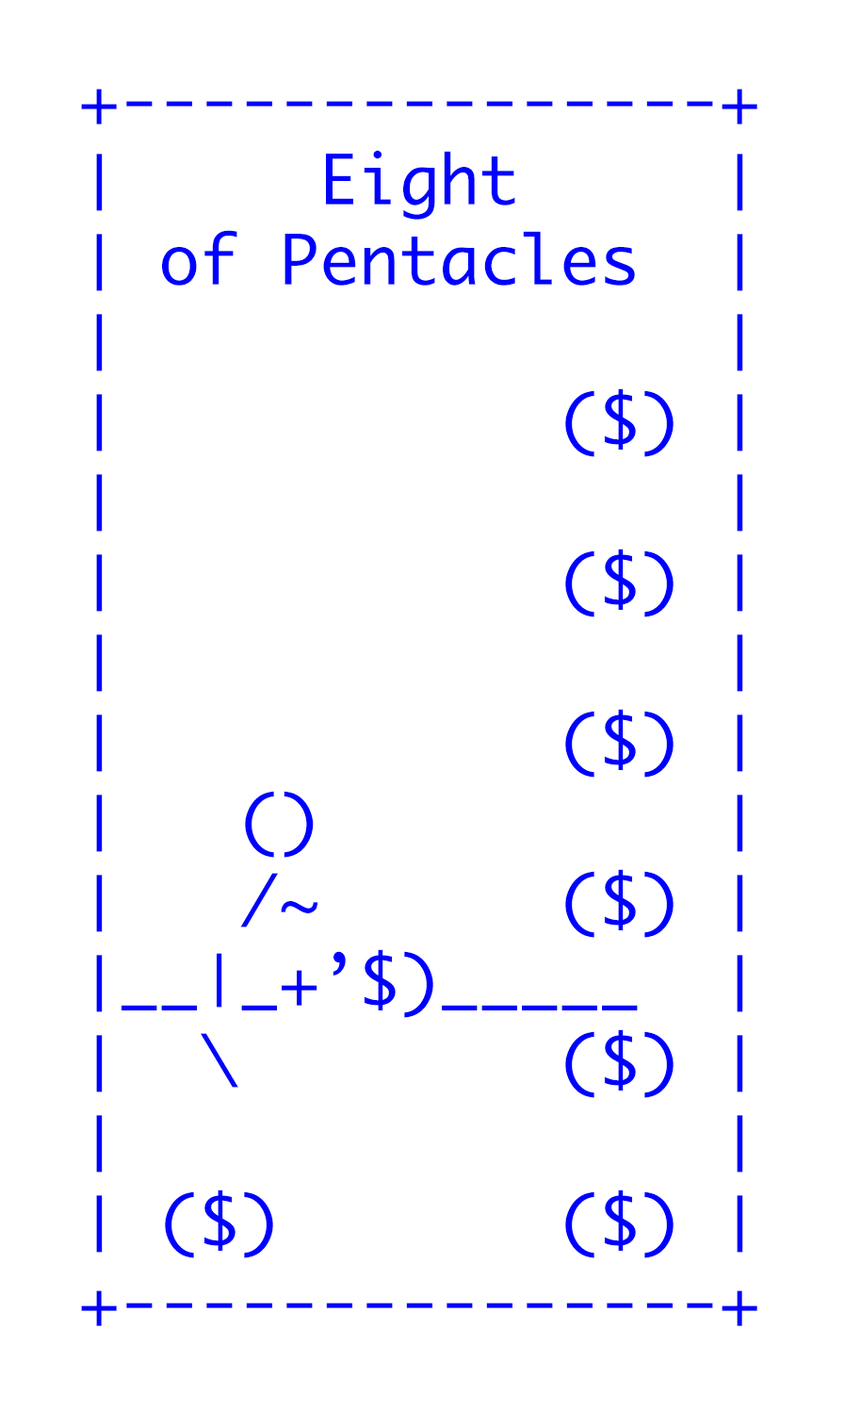
<style>
.page{position:relative;width:845px;height:1411px;background:#ffffff}
.page>*{position:absolute;margin:0}
.t1{font:66.7px "Monaco";color:#0000ff}
</style>
<div class="page">
<p class="t1" style="left:81px;top:89px;width:677px;height:1237px">+---------------+<br>│     Eight     │<br>│ of Pentacles  │<br>│               │<br>│           ($) │<br>│               │<br>│           ($) │<br>│               │ <br>│           ($) │ <br>│   ()          │<br>│   /~      ($) │ <br>│__|_+’$)_____  │ <br>│  \        ($) │<br>│               │<br>│ ($)       ($) │<br>+---------------+</p>
</div>
